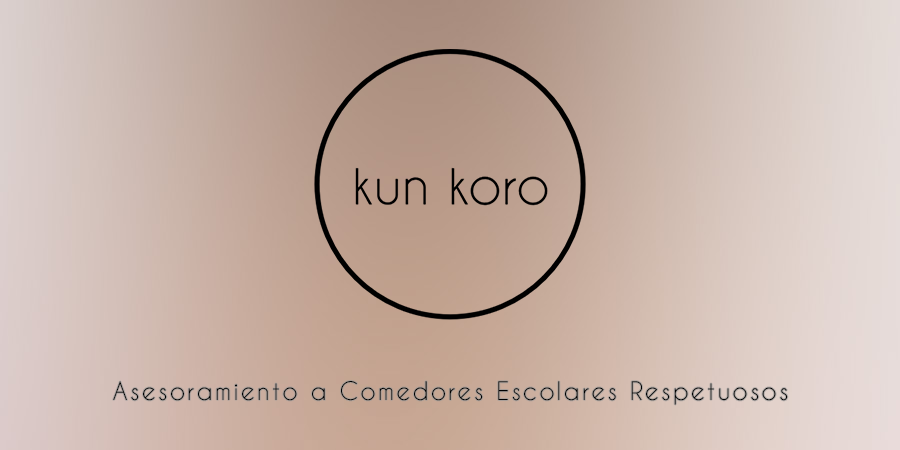
<style>
.page{position:relative;width:900px;height:450px}
.page>*{position:absolute;margin:0}
.t1{font:24px "CaviarDreams";letter-spacing:0.1em;color:#000000}
</style>
<div class="page">
<p class="t1" style="left:113px;top:381px;width:675px;height:24px">Asesoramiento a Comedores Escolares Respetuosos</p>
</div>
